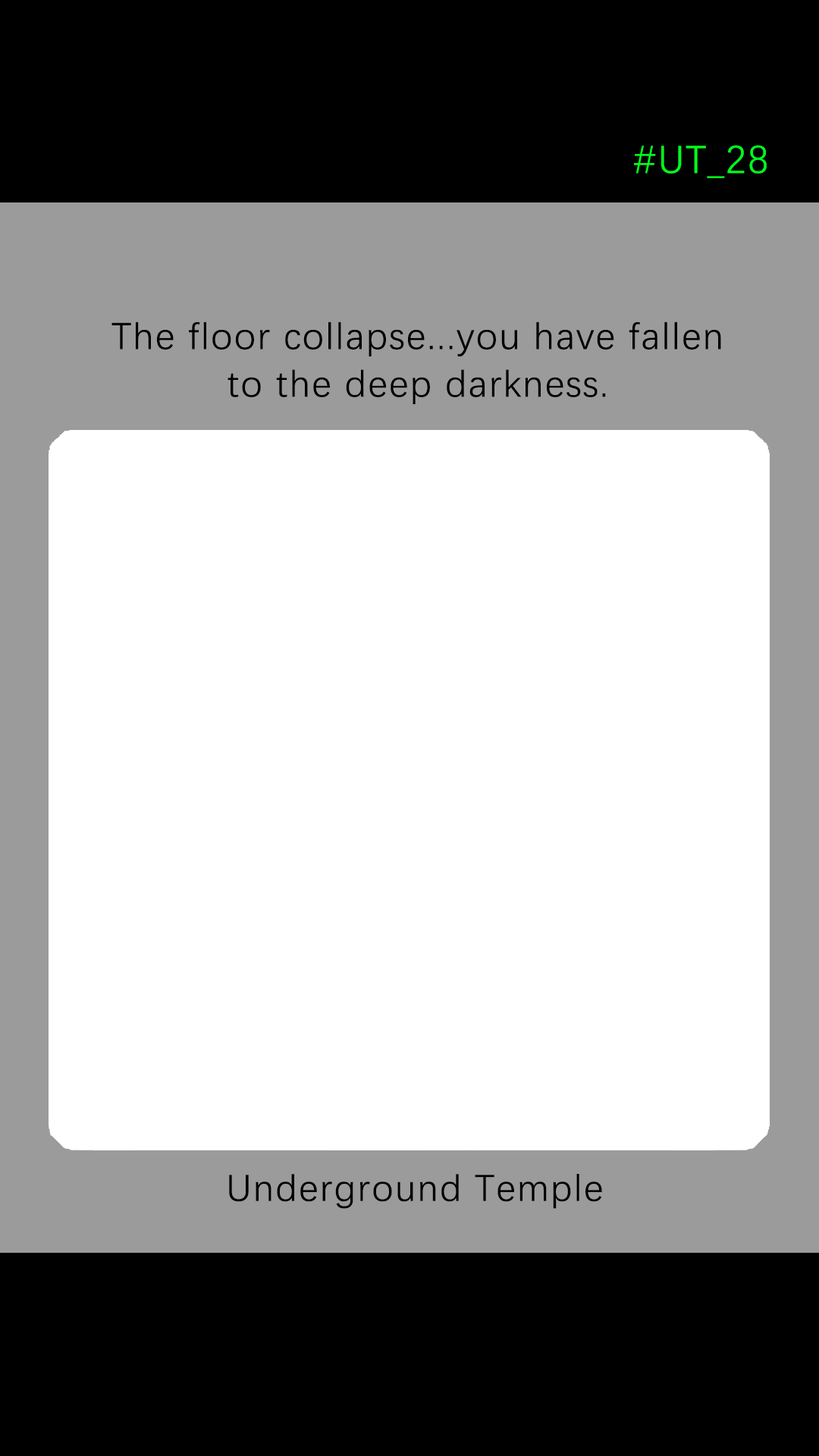
<style>
.page{position:relative;width:819px;height:1456px;background:#ffffff}
.page>*{position:absolute;margin:0}
.t1{font:39.2px "DengXian-Regular";letter-spacing:0.04em;color:#00ff1e}
.t2{font:37.9px/47.6px "DengXian-Regular";letter-spacing:0.04em;color:#000000}
.t3{font:37.9px "DengXian-Regular";letter-spacing:0.04em;color:#000000}
</style>
<div class="page">
<p class="t1" style="left:634px;top:145px;width:133px;height:33px">#UT_28</p>
<p class="t2" style="left:111px;top:322px;width:610px;height:82px;text-align:center">The floor collapse...you have fallen<br>to the deep darkness.</p>
<p class="t3" style="left:229px;top:1174px;width:373px;height:35px">Underground Temple</p>
</div>
